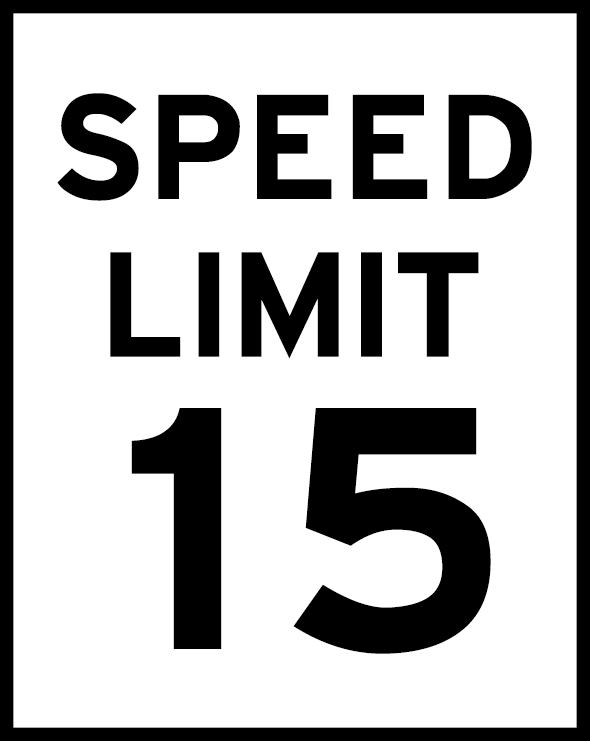
<style>
.page{position:relative;width:590px;height:741px;background:#ffffff}
.page>*{position:absolute;margin:0}
.t1{font:157.7px/157.7px "HittheRoad";color:#000000}
.t2{font:365px "HittheRoad";color:#000000}
</style>
<div class="page">
<p class="t1" style="left:57px;top:93px;width:475px;height:266px;text-align:center">SPEED<br>LIMIT</p>
<p class="t2" style="left:131px;top:408px;width:360px;height:246px">15</p>
</div>
